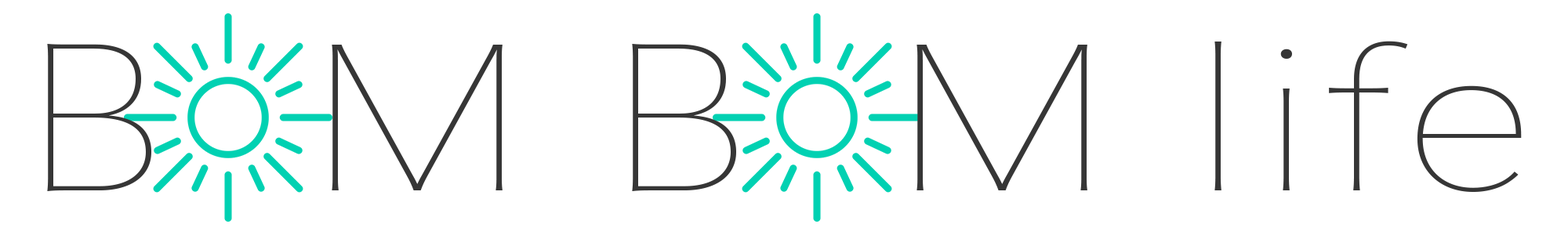
<style>
.page{position:relative;width:1568px;height:235px;background:#ffffff}
.page>*{position:absolute;margin:0}
.t1{font:196px "HiraginoSans-W0";letter-spacing:0.06em;color:#363636;scale:1.16 1}
</style>
<div class="page">
<p class="t1" style="left:47px;top:41px;width:1475px;height:151px">B  M B  M life</p>
</div>
